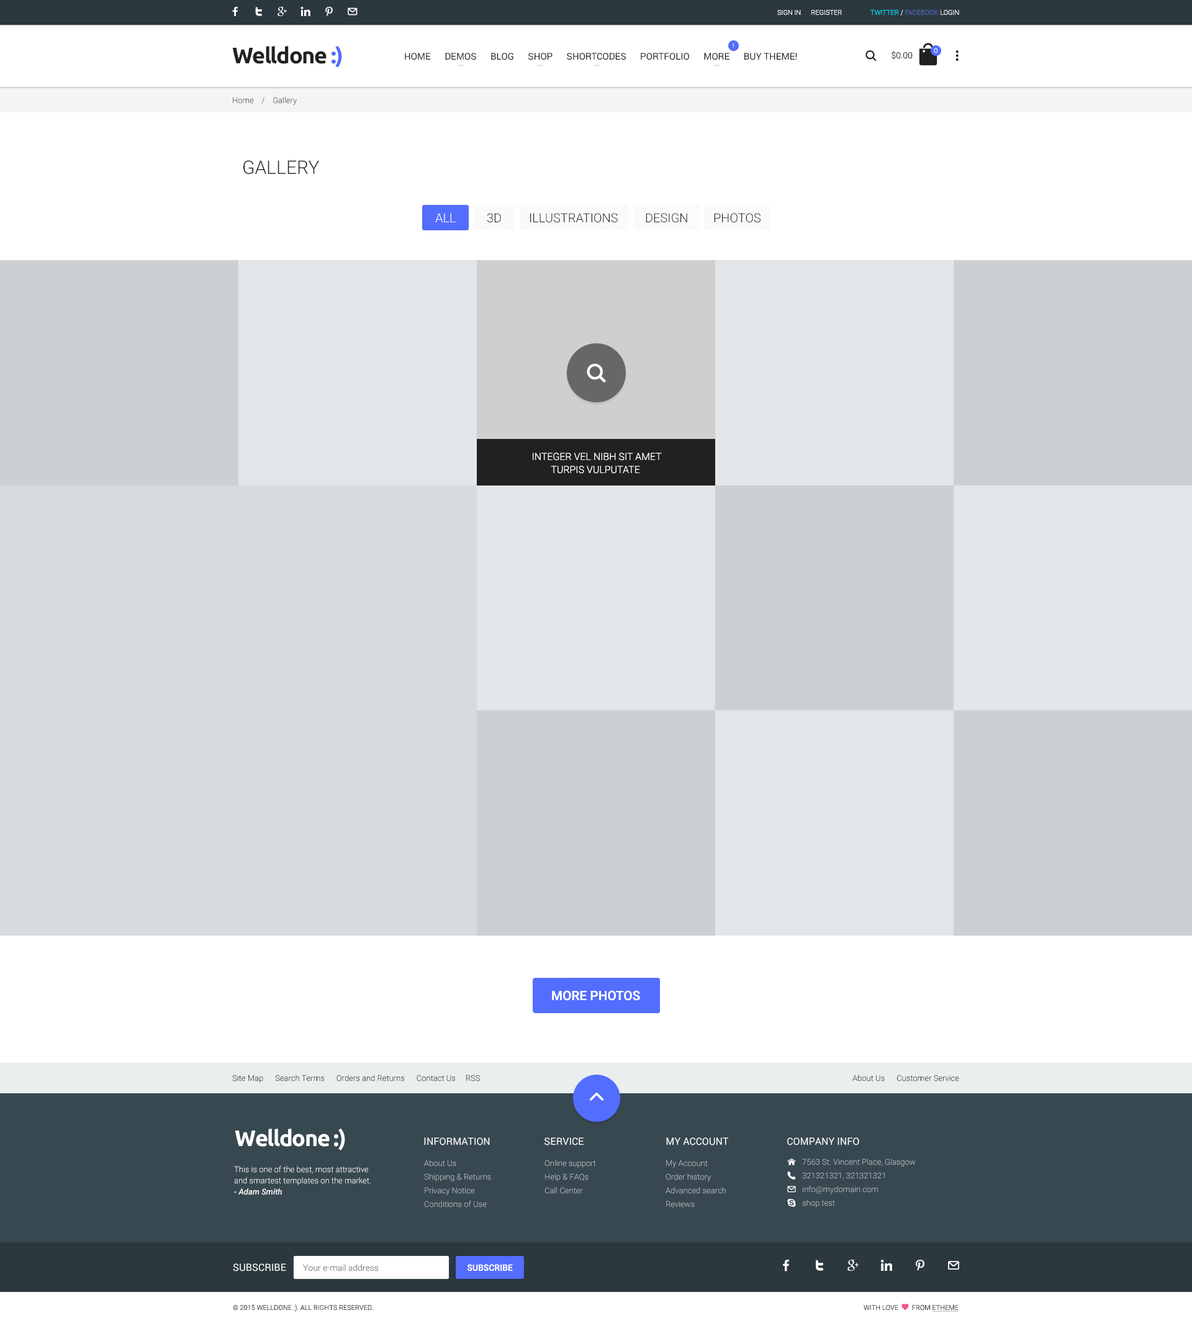
<style>
.page{position:relative;width:1192px;height:1323px;background:#ffffff}
.page>*{position:absolute;margin:0}
.t1{font:6.8px "Roboto-Light";color:#ffffff}
.t2{font:6.8px "Roboto-Light";color:#526ac4}
.t3{font:6.8px "Roboto-Light";color:#00e4ff}
.t4{font:22.3px "Ubuntu-Bold";letter-spacing:-0.04em;color:#212121}
.t5{font:22.3px "Ubuntu-Bold";letter-spacing:-0.04em;color:#536dfe}
.t6{font:9.3px "Roboto-Regular";color:#212121}
.t7{font:6.2px "Roboto-Regular"}
.t8{font:8.7px "Roboto-Light";color:#212121}
.t9{font:8.1px "Roboto-Light";color:#2b2b2b}
.t10{font:18.6px "Roboto-Light";color:#212121;text-transform:uppercase}
.t11{font:12.4px "Roboto-Light";color:#ffffff;text-transform:uppercase}
.t12{font:12.4px "Roboto-Light";color:#212121;text-transform:uppercase}
.t13{font:9.9px/13px "Roboto-Light";color:#ffffff;text-transform:uppercase}
.t14{font:13px "Roboto-Medium";color:#ffffff;text-transform:uppercase}
.t15{font:8.1px "Roboto-Light";color:#000000}
.t16{font:22.3px "Ubuntu-Bold";letter-spacing:-0.04em;color:#ffffff}
.t17{font:9.9px "Roboto-Regular";color:#ffffff;text-transform:uppercase}
.t18{font:8.1px/11.2px "Roboto-Light";color:#ffffff}
.t19{font:8.1px/11.2px "Roboto-MediumItalic";color:#ffffff}
.t20{font:8.1px/13.7px "Roboto-Light";color:#bbc2c6}
.t21{font:8.7px "Roboto-Light";color:#848484}
.t22{font:8.7px "Roboto-Medium";color:#ffffff;text-transform:uppercase}
.t23{font:6.8px "Roboto-Light";color:#2b2b2b;text-transform:uppercase}
</style>
<div class="page">
<p class="t1" style="left:777px;top:10px;width:65px;height:5px">SIGN IN      REGISTER</p>
<p class="t2" style="left:870px;top:10px;width:89px;height:6px"><span class="t3">TWITTER </span><span class="t1">/ </span>FACEBOOK <span class="t1">LOGIN</span></p>
<p class="t4" style="left:232px;top:45px;width:110px;height:23px">Welldone <span class="t5">:)</span></p>
<p class="t6" style="left:405px;top:53px;width:392px;height:7px">HOME      DEMOS      BLOG      SHOP      SHORTCODES      PORTFOLIO      MORE      BUY THEME!</p>
<p class="t7" style="left:732px;top:43px;width:2px;height:5px">!</p>
<p class="t8" style="left:891px;top:51px;width:21px;height:9px">$0.00</p>
<p class="t1" style="left:934px;top:48px;width:3px;height:5px">0</p>
<p class="t9" style="left:233px;top:97px;width:64px;height:8px">Home    /    Gallery</p>
<p class="t10" style="left:243px;top:160px;width:76px;height:14px">Gallery</p>
<p class="t11" style="left:435px;top:213px;width:21px;height:9px">All</p>
<p class="t12" style="left:487px;top:213px;width:14px;height:10px">3D</p>
<p class="t12" style="left:530px;top:213px;width:88px;height:10px">Illustrations</p>
<p class="t12" style="left:646px;top:213px;width:41px;height:10px">Design</p>
<p class="t12" style="left:714px;top:213px;width:46px;height:10px">Photos</p>
<p class="t13" style="left:533px;top:452px;width:129px;height:22px;text-align:center">Integer vel nibh sit amet<br>turpis vulputate</p>
<p class="t14" style="left:552px;top:990px;width:88px;height:11px">more photos</p>
<p class="t15" style="left:232px;top:1074px;width:248px;height:8px">Site Map      Search Terms      Orders and Returns      Contact Us     RSS</p>
<p class="t15" style="left:852px;top:1074px;width:107px;height:7px">About Us      Customer Service</p>
<p class="t16" style="left:235px;top:1128px;width:110px;height:22px">Welldone :)</p>
<p class="t17" style="left:424px;top:1137px;width:66px;height:8px">Information</p>
<p class="t17" style="left:544px;top:1137px;width:39px;height:8px">service</p>
<p class="t17" style="left:666px;top:1137px;width:62px;height:8px">My account</p>
<p class="t17" style="left:787px;top:1137px;width:72px;height:8px">Company Info</p>
<p class="t18" style="left:234px;top:1166px;width:137px;height:29px">This is one of the best, most attractive and smartest templates on the market. <br><span class="t19">- Adam Smith</span></p>
<p class="t20" style="left:424px;top:1159px;width:67px;height:48px">About Us<br>Shipping &amp; Returns<br>Privacy Notice<br>Conditions of Use</p>
<p class="t20" style="left:544px;top:1159px;width:52px;height:35px">Online support<br>Help &amp; FAQs<br>Call Center</p>
<p class="t20" style="left:665px;top:1159px;width:61px;height:48px">My Account<br>Order history<br>Advanced search<br>Reviews</p>
<p class="t20" style="left:802px;top:1158px;width:113px;height:49px">7563 St. Vincent Place, Glasgow<br>321321321, 321321321<br>info@mydomain.com<br>shop.test</p>
<p class="t17" style="left:233px;top:1263px;width:53px;height:8px">Subscribe</p>
<p class="t21" style="left:303px;top:1264px;width:76px;height:7px">Your e-mail address</p>
<p class="t22" style="left:467px;top:1264px;width:46px;height:7px">SUBSCRIBE</p>
<p class="t23" style="left:233px;top:1304px;width:140px;height:8px">© 2015 Welldone :). All Rights Reserved.</p>
</div>
